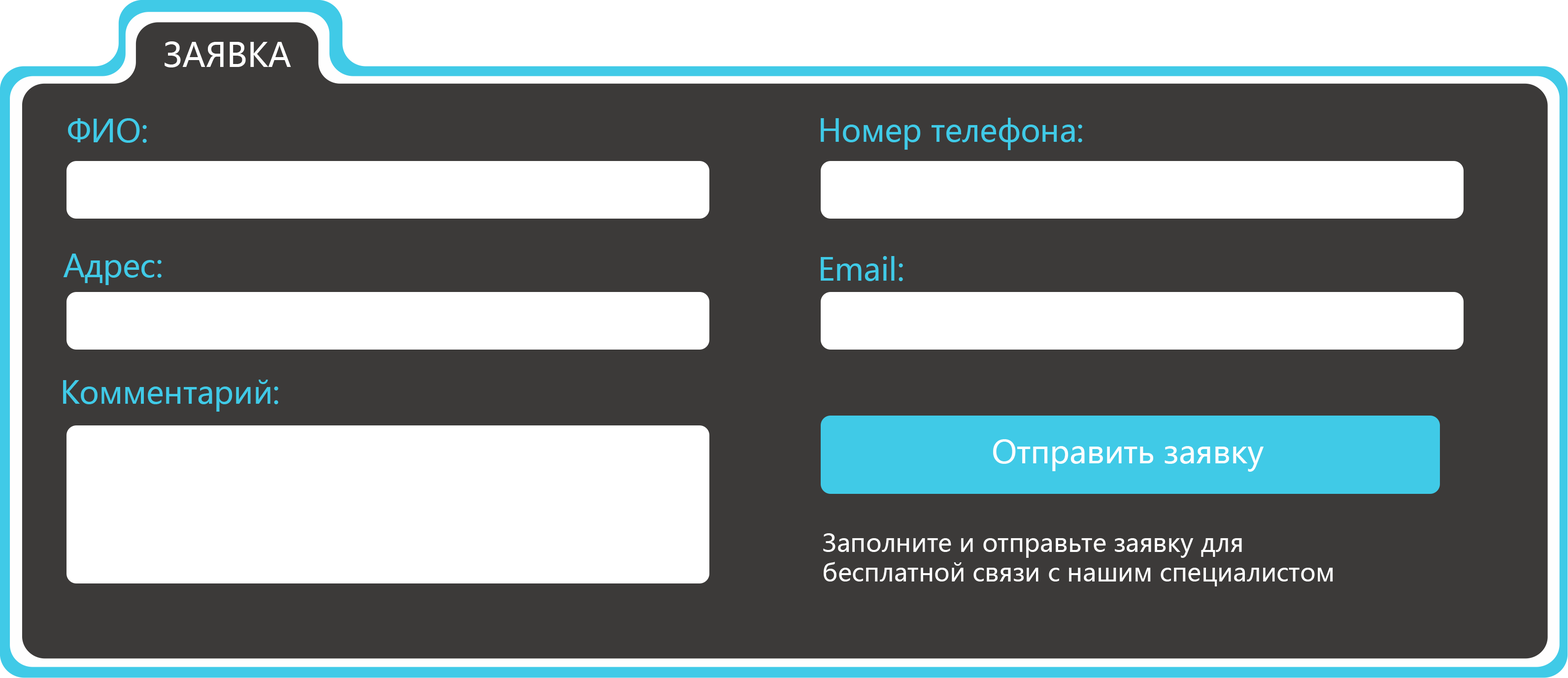
<style>
.page{position:relative;width:1568px;height:678px;background:#3c3a39}
.page>*{position:absolute;margin:0}
.t1{font:32.9px "MicrosoftYaHei";color:#ffffff}
.t2{font:30.8px "MicrosoftYaHei";color:#40cae7}
.t3{font:30.8px "MicrosoftYaHei";color:#fefefe}
.t4{font:24.6px "MicrosoftYaHei";color:#ffffff}
</style>
<div class="page">
<p class="t1" style="left:165px;top:41px;width:126px;height:26px">ЗАЯВКА</p>
<p class="t2" style="left:68px;top:118px;width:79px;height:25px">ФИО:</p>
<p class="t2" style="left:821px;top:118px;width:261px;height:32px">Номер телефона:</p>
<p class="t2" style="left:63px;top:254px;width:99px;height:31px">Адрес:</p>
<p class="t2" style="left:821px;top:256px;width:82px;height:25px">Email:</p>
<p class="t2" style="left:63px;top:380px;width:215px;height:32px">Комментарий:</p>
<p class="t3" style="left:993px;top:439px;width:271px;height:33px">Отправить заявку</p>
<p class="t4" style="left:823px;top:534px;width:510px;height:53px">Заполните и отправьте заявку для <br>бесплатной связи с нашим специалистом</p>
</div>
